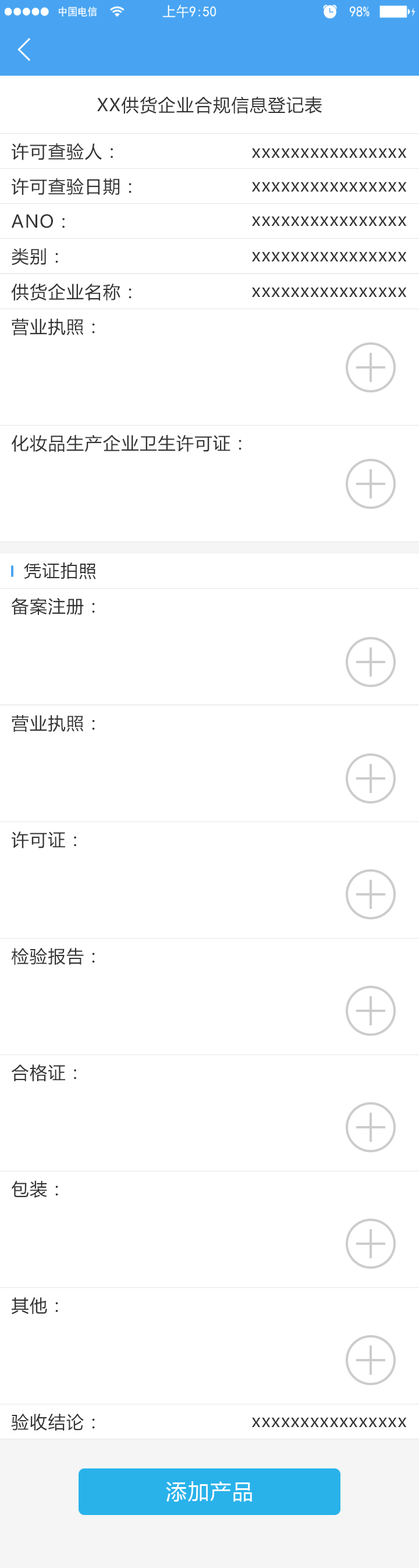
<style>
.page{position:relative;width:419px;height:1568px;background:#ffffff}
.page>*{position:absolute;margin:0}
.t1{font:17.5px "MicrosoftYaHei";letter-spacing:0.05em;color:#333333}
.t2{font:21px "MicrosoftYaHei";letter-spacing:0.05em;color:#ffffff}
</style>
<div class="page">
<p class="t1" style="left:97px;top:96px;width:225px;height:18px">XX供货企业合规信息登记表</p>
<p class="t1" style="left:12px;top:143px;width:101px;height:17px">许可查验人：</p>
<p class="t1" style="left:252px;top:148px;width:155px;height:10px">xxxxxxxxxxxxxxxx</p>
<p class="t1" style="left:12px;top:178px;width:120px;height:18px">许可查验日期：</p>
<p class="t1" style="left:252px;top:182px;width:155px;height:10px">xxxxxxxxxxxxxxxx</p>
<p class="t1" style="left:12px;top:214px;width:53px;height:14px">ANO：</p>
<p class="t1" style="left:252px;top:216px;width:155px;height:10px">xxxxxxxxxxxxxxxx</p>
<p class="t1" style="left:12px;top:248px;width:46px;height:18px">类别：</p>
<p class="t1" style="left:252px;top:252px;width:155px;height:9px">xxxxxxxxxxxxxxxx</p>
<p class="t1" style="left:11px;top:284px;width:121px;height:17px">供货企业名称：</p>
<p class="t1" style="left:252px;top:287px;width:155px;height:10px">xxxxxxxxxxxxxxxx</p>
<p class="t1" style="left:12px;top:318px;width:83px;height:17px">营业执照：</p>
<p class="t1" style="left:12px;top:435px;width:230px;height:17px">化妆品生产企业卫生许可证：</p>
<p class="t1" style="left:24px;top:562px;width:72px;height:17px">凭证拍照</p>
<p class="t1" style="left:11px;top:597px;width:84px;height:18px">备案注册：</p>
<p class="t1" style="left:12px;top:715px;width:83px;height:17px">营业执照：</p>
<p class="t1" style="left:12px;top:831px;width:64px;height:17px">许可证：</p>
<p class="t1" style="left:12px;top:948px;width:83px;height:17px">检验报告：</p>
<p class="t1" style="left:12px;top:1064px;width:64px;height:17px">合格证：</p>
<p class="t1" style="left:11px;top:1181px;width:47px;height:17px">包装：</p>
<p class="t1" style="left:12px;top:1297px;width:46px;height:17px">其他：</p>
<p class="t1" style="left:11px;top:1413px;width:84px;height:18px">验收结论：</p>
<p class="t1" style="left:252px;top:1417px;width:155px;height:10px">xxxxxxxxxxxxxxxx</p>
<p class="t2" style="left:166px;top:1481px;width:86px;height:21px">添加产品</p>
</div>
